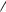
<style>
.page{position:relative;width:6px;height:12px;background:#ffffff}
.page>*{position:absolute;margin:0}
.t1{font:14px "xiaowei";letter-spacing:0.05em}
</style>
<div class="page">
<p class="t1" style="left:0px;top:1px;width:7px;height:11px">/</p>
</div>
